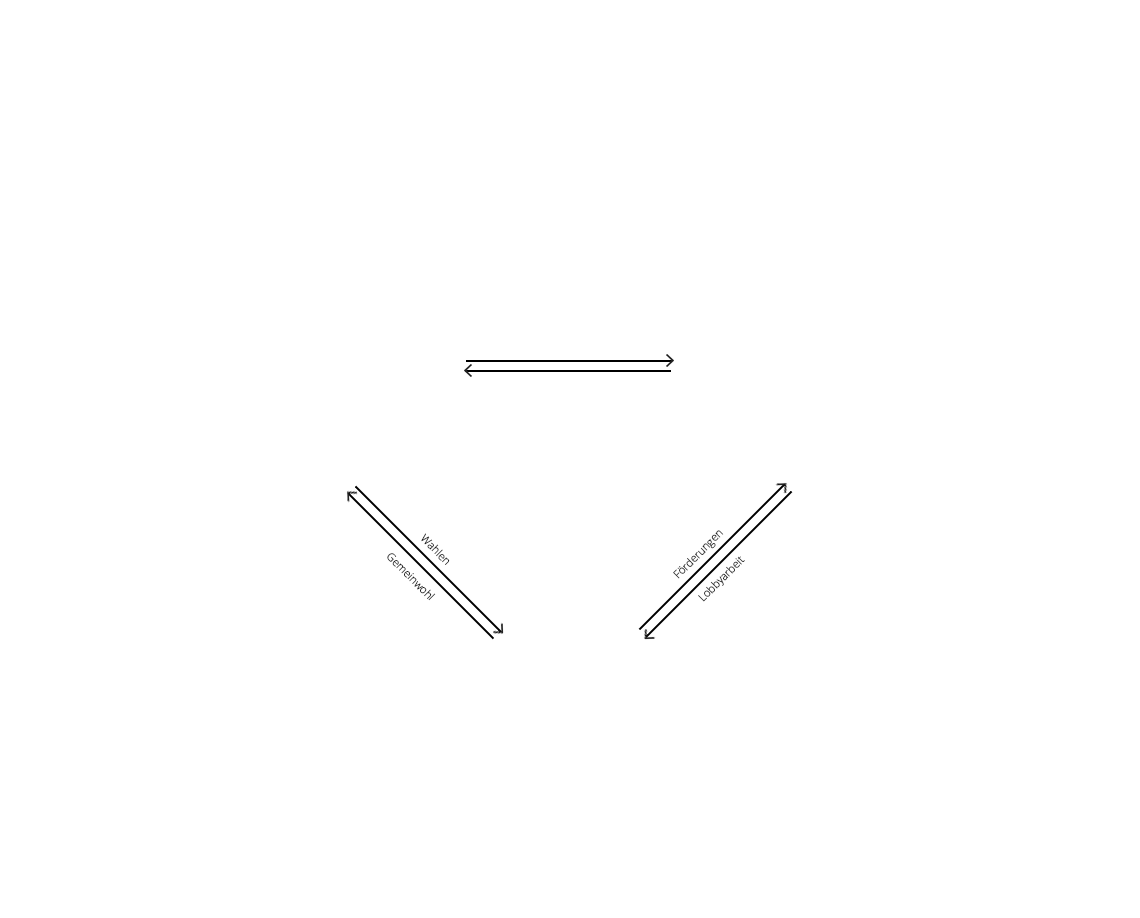
<style>
.page{position:relative;width:1140px;height:918px;background:#ffffff}
.page>*{position:absolute;margin:0}
.t1{font:11px "OpenSans-Light";color:#222222}
</style>
<div class="page">
<p class="t1" style="left:421px;top:533px;width:29px;height:32px;rotate:45deg">Wahlen</p>
<p class="t1" style="left:673px;top:530px;width:51px;height:49px;rotate:-45deg">Förderungen</p>
<p class="t1" style="left:387px;top:553px;width:49px;height:48px;rotate:45deg">Gemeinwohl</p>
<p class="t1" style="left:698px;top:556px;width:47px;height:46px;rotate:-45deg">Lobbyarbeit</p>
</div>
